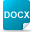
<style>
.page{position:relative;width:32px;height:32px}
.page>*{position:absolute;margin:0}
.t1{font:9px "Arial-BoldMT";color:#ffffff}
</style>
<div class="page">
<p class="t1" style="left:4px;top:11px;width:26px;height:7px">DOCX</p>
</div>
